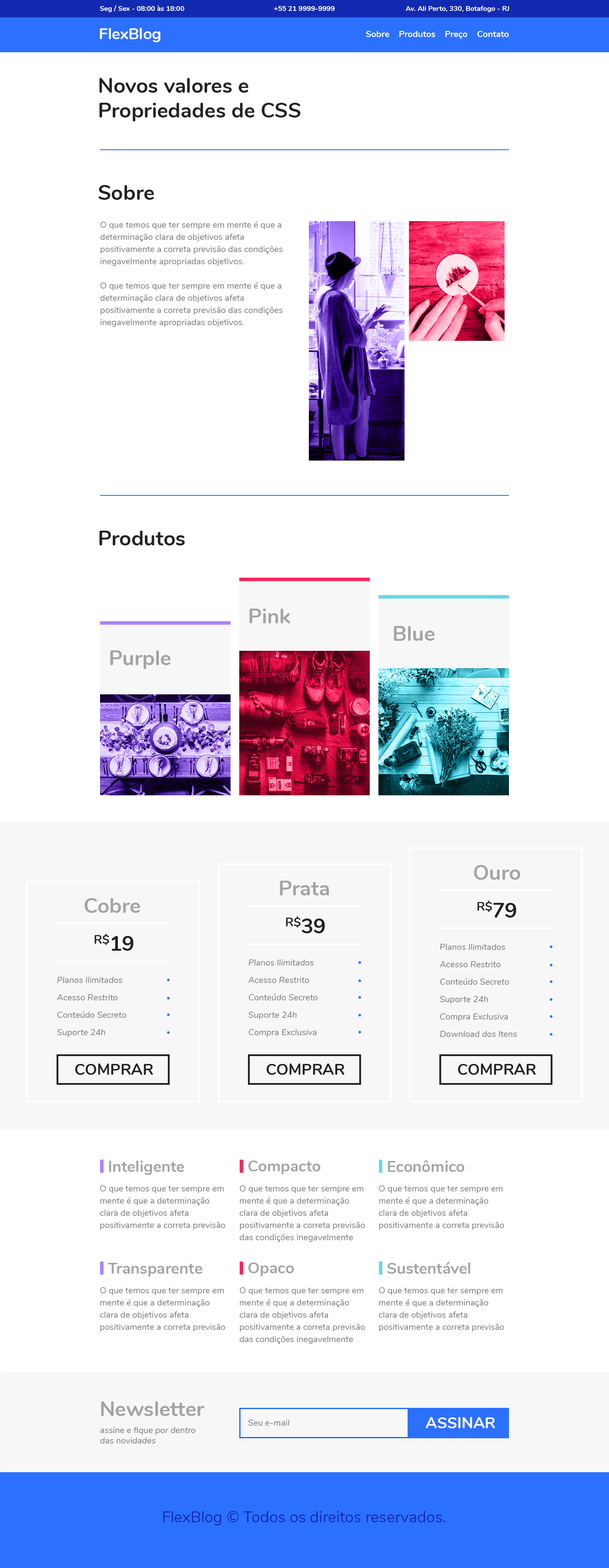
<style>
.page{position:relative;width:609px;height:1568px;background:#ffffff}
.page>*{position:absolute;margin:0}
.t1{font:7px "Nunito-Bold";color:#ffffff}
.t2{font:15.7px "Nunito-Bold";color:#ffffff}
.t3{font:8.7px "Nunito-Bold";color:#ffffff}
.t4{font:20.9px "Nunito-Bold";color:#222222}
.t5{font:8.7px/12.2px "Nunito-Regular";color:#7c7c7c}
.t6{font:20.9px "Nunito-Bold";color:#a4a4a4}
.t7{font:8.7px/17.4px "Nunito-Italic";color:#7c7c7c}
.t8{font:15.7px "Nunito-Bold";color:#222222}
.t9{font:15.7px "Nunito-Bold";color:#a4a4a4}
.t10{font:8.7px/12.2px "Nunito-Regular";color:#7b7b7b}
.t11{font:8.7px "Nunito-Italic";color:#7c7c7c}
.t12{font:15.7px "Nunito-Bold";color:#ffffff;text-transform:uppercase}
.t13{font:15.7px "Nunito-Regular";color:#122ab2}
</style>
<div class="page">
<p class="t1" style="left:100px;top:5px;width:85px;height:7px">Seg / Sex - 08:00 às 18:00</p>
<p class="t1" style="left:406px;top:6px;width:104px;height:6px">Av. Ali Perto, 330, Botafogo - RJ</p>
<p class="t1" style="left:274px;top:6px;width:61px;height:5px">+55 21 9999-9999</p>
<p class="t2" style="left:100px;top:28px;width:61px;height:14px">FlexBlog</p>
<p class="t3" style="left:366px;top:31px;width:143px;height:8px">Sobre    Produtos    Preço    Contato</p>
<p class="t4" style="left:99px;top:78px;width:202px;height:43px">Novos valores e<br>Propriedades de CSS</p>
<p class="t4" style="left:98px;top:185px;width:56px;height:15px">Sobre</p>
<p class="t5" style="left:100px;top:221px;width:183px;height:106px">O que temos que ter sempre em mente é que a determinação clara de objetivos afeta positivamente a correta previsão das condições inegavelmente apropriadas objetivos.<br><br>O que temos que ter sempre em mente é que a determinação clara de objetivos afeta positivamente a correta previsão das condições inegavelmente apropriadas objetivos.</p>
<p class="t4" style="left:99px;top:531px;width:86px;height:14px">Produtos</p>
<p class="t6" style="left:249px;top:609px;width:41px;height:14px">Pink</p>
<p class="t6" style="left:394px;top:626px;width:41px;height:15px">Blue</p>
<p class="t6" style="left:110px;top:650px;width:61px;height:19px">Purple</p>
<p class="t6" style="left:474px;top:865px;width:47px;height:15px">Ouro</p>
<p class="t6" style="left:280px;top:881px;width:49px;height:14px">Prata</p>
<p class="t6" style="left:84px;top:898px;width:56px;height:15px">Cobre</p>
<p class="t4" style="left:478px;top:901px;width:39px;height:17px">R$79</p>
<p class="t4" style="left:286px;top:916px;width:39px;height:17px">R$39</p>
<p class="t4" style="left:94px;top:934px;width:40px;height:17px">R$19</p>
<p class="t7" style="left:440px;top:944px;width:77px;height:93px">Planos Ilimitados<br>Acesso Restrito<br>Conteúdo Secreto<br>Suporte 24h<br>Compra Exclusiva<br>Download dos Itens</p>
<p class="t7" style="left:249px;top:959px;width:69px;height:78px">Planos Ilimitados<br>Acesso Restrito<br>Conteúdo Secreto<br>Suporte 24h<br>Compra Exclusiva</p>
<p class="t7" style="left:57px;top:977px;width:70px;height:60px">Planos Ilimitados<br>Acesso Restrito<br>Conteúdo Secreto<br>Suporte 24h</p>
<p class="t8" style="left:75px;top:1063px;width:78px;height:12px">COMPRAR</p>
<p class="t8" style="left:266px;top:1063px;width:79px;height:12px">COMPRAR</p>
<p class="t8" style="left:458px;top:1063px;width:78px;height:12px">COMPRAR</p>
<p class="t9" style="left:109px;top:1161px;width:75px;height:14px">Inteligente</p>
<p class="t9" style="left:248px;top:1161px;width:73px;height:13px">Compacto</p>
<p class="t9" style="left:388px;top:1160px;width:77px;height:12px">Econômico</p>
<p class="t5" style="left:100px;top:1185px;width:125px;height:45px">O que temos que ter sempre em mente é que a determinação clara de objetivos afeta positivamente a correta previsão das condições inegavelmente apropriadas.</p>
<p class="t10" style="left:240px;top:1185px;width:125px;height:57px">O que temos que ter sempre em mente é que a determinação clara de objetivos afeta positivamente a correta previsão das condições inegavelmente apropriadas.</p>
<p class="t5" style="left:379px;top:1185px;width:126px;height:45px">O que temos que ter sempre em mente é que a determinação clara de objetivos afeta positivamente a correta previsão das condições inegavelmente apropriadas.</p>
<p class="t9" style="left:108px;top:1263px;width:94px;height:14px">Transparente</p>
<p class="t9" style="left:248px;top:1262px;width:46px;height:14px">Opaco</p>
<p class="t9" style="left:387px;top:1262px;width:84px;height:12px">Sustentável</p>
<p class="t5" style="left:100px;top:1287px;width:125px;height:45px">O que temos que ter sempre em mente é que a determinação clara de objetivos afeta positivamente a correta previsão das condições inegavelmente apropriadas.</p>
<p class="t10" style="left:240px;top:1287px;width:125px;height:57px">O que temos que ter sempre em mente é que a determinação clara de objetivos afeta positivamente a correta previsão das condições inegavelmente apropriadas.</p>
<p class="t5" style="left:379px;top:1287px;width:126px;height:45px">O que temos que ter sempre em mente é que a determinação clara de objetivos afeta positivamente a correta previsão das condições inegavelmente apropriadas.</p>
<p class="t6" style="left:101px;top:1401px;width:104px;height:15px">Newsletter</p>
<p class="t11" style="left:248px;top:1420px;width:41px;height:6px">Seu e-mail</p>
<p class="t12" style="left:426px;top:1417px;width:69px;height:11px">ASSINAR</p>
<p class="t11" style="left:100px;top:1427px;width:96px;height:17px">assine e fique por dentro<br>das novidades</p>
<p class="t13" style="left:163px;top:1511px;width:283px;height:14px">FlexBlog © Todos os direitos reservados.</p>
</div>
